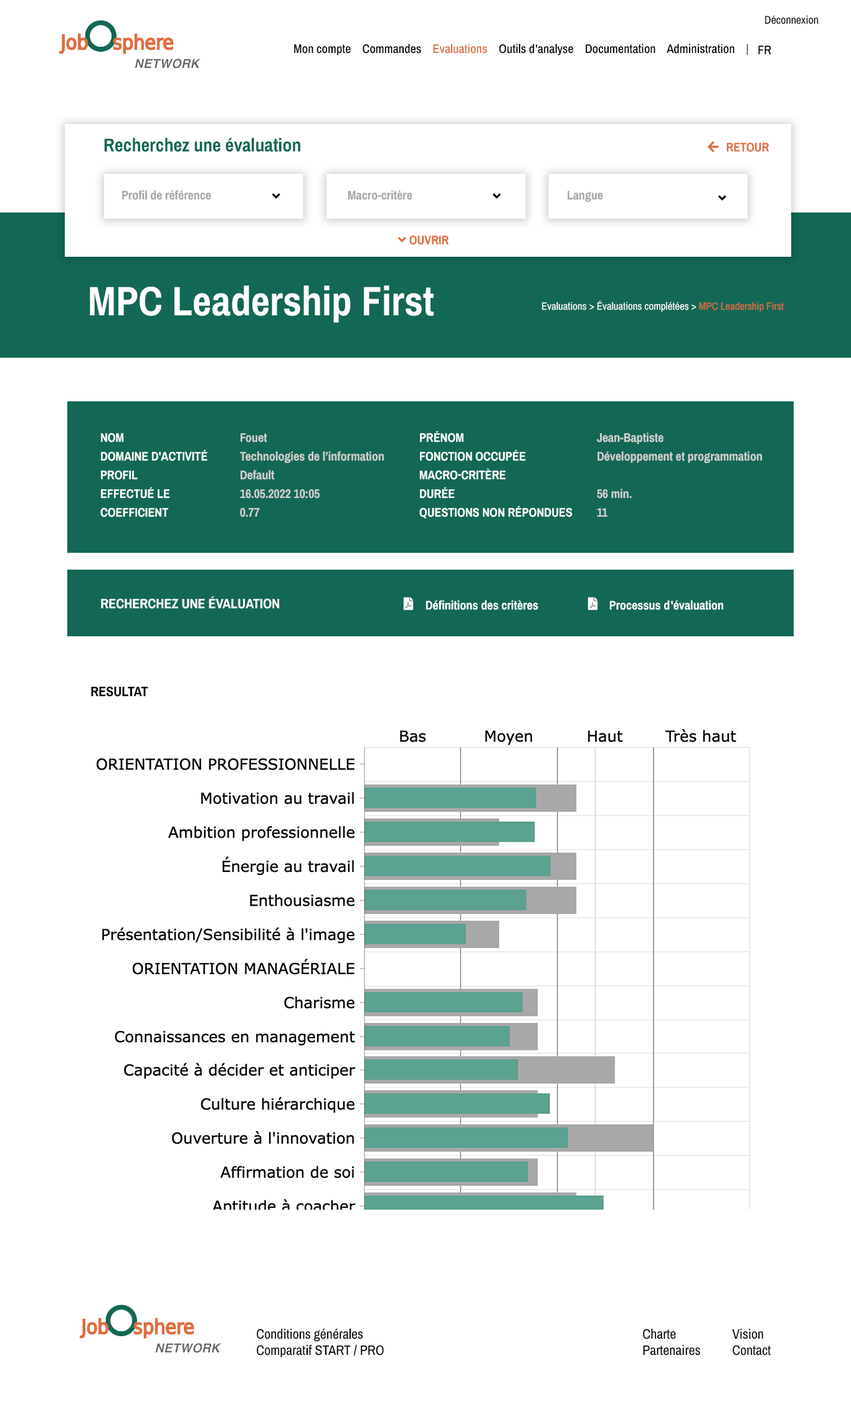
<style>
.page{position:relative;width:851px;height:1401px;background:#ffffff}
.page>*{position:absolute;margin:0}
.t1{font:11.2px "ArchivoNarrow-Regular";color:#000000}
.t2{font:12.5px "ArchivoNarrowRoman-Medium";color:#000000}
.t3{font:12.5px "ArchivoNarrowRoman-Medium";color:#e06d3f}
.t4{font:18.7px "ArchivoNarrowRoman-Bold";color:#126855}
.t5{font:12.5px "ArchivoNarrowRoman-Bold";color:#e06d3f;text-transform:uppercase}
.t6{font:12.5px "ArchivoNarrowRoman-Bold";color:#a6a6a6}
.t7{font:41.1px "ArchivoNarrowRoman-Bold";color:#ffffff}
.t8{font:10.6px "ArchivoNarrow-Regular";color:#ffffff}
.t9{font:10.6px "ArchivoNarrow-Regular";color:#e06d3f}
.t10{font:12.5px/18.7px "ArchivoNarrowRoman-Bold";color:#ffffff;text-transform:uppercase}
.t11{font:12.5px/18.7px "ArchivoNarrowRoman-Bold";color:#d0cfcf}
.t12{font:13.7px "ArchivoNarrowRoman-Bold";color:#ffffff;text-transform:uppercase}
.t13{font:12.5px "ArchivoNarrowRoman-Bold";color:#ffffff}
.t14{font:13.7px "ArchivoNarrowRoman-Bold";color:#000000}
.t15{font:13.7px "ArchivoNarrow-Regular";color:#000000}
.t16{font:13.7px "ArchivoNarrow-Regular";color:#010101}
</style>
<div class="page">
<p class="t1" style="left:765px;top:15px;width:54px;height:9px">Déconnexion</p>
<p class="t2" style="left:294px;top:44px;width:441px;height:11px">Mon compte    Commandes    <span class="t3">Evaluations</span>    Outils d'analyse    Documentation    Administration</p>
<p class="t2" style="left:758px;top:45px;width:13px;height:10px">FR</p>
<p class="t4" style="left:104px;top:138px;width:196px;height:14px">Recherchez une évaluation</p>
<p class="t5" style="left:727px;top:142px;width:43px;height:10px">Retour</p>
<p class="t6" style="left:122px;top:190px;width:89px;height:10px">Profil de référence</p>
<p class="t6" style="left:348px;top:190px;width:65px;height:10px">Macro-critère</p>
<p class="t6" style="left:568px;top:191px;width:35px;height:11px">Langue</p>
<p class="t7" style="left:90px;top:285px;width:344px;height:38px">MPC Leadership First</p>
<p class="t8" style="left:542px;top:300px;width:242px;height:12px">Evaluations &gt; Évaluations complétées &gt;<span class="t9"> MPC Leadership First</span></p>
<p class="t10" style="left:100px;top:432px;width:108px;height:85px">Nom<br>Domaine d'activité<br>Profil<br>Effectué le<br>Coefficient</p>
<p class="t11" style="left:240px;top:433px;width:144px;height:84px">Fouet<br>Technologies de l’information<br>Default<br>16.05.2022 10:05<br>0.77</p>
<p class="t10" style="left:419px;top:431px;width:154px;height:87px">Prénom<br>Fonction occupée<br>Macro-critère<br>Durée<br>Questions non répondues</p>
<p class="t11" style="left:597px;top:432px;width:166px;height:85px">Jean-Baptiste<br>Développement et programmation<br><br>56 min.<br>11</p>
<p class="t12" style="left:101px;top:596px;width:179px;height:13px">Recherchez une évaluation</p>
<p class="t13" style="left:426px;top:600px;width:112px;height:10px">Définitions des critères</p>
<p class="t13" style="left:609px;top:600px;width:114px;height:10px">Processus d'évaluation</p>
<p class="t14" style="left:91px;top:686px;width:57px;height:11px">RESULTAT</p>
<p class="t15" style="left:257px;top:1328px;width:127px;height:29px">Conditions générales<br>Comparatif START / PRO</p>
<p class="t16" style="left:643px;top:1328px;width:57px;height:27px">Charte<br>Partenaires</p>
<p class="t16" style="left:732px;top:1328px;width:39px;height:27px">Vision<br>Contact</p>
</div>
